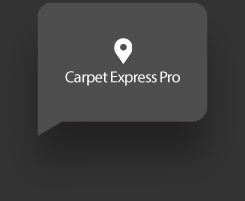
<style>
.page{position:relative;width:245px;height:201px;background:#4e4e4e}
.page>*{position:absolute;margin:0}
.t1{font:16px "MyriadPro-Regular";letter-spacing:-0.02em;color:#ffffff}
</style>
<div class="page">
<p class="t1" style="left:65px;top:71px;width:115px;height:15px">Carpet Express Pro</p>
</div>
